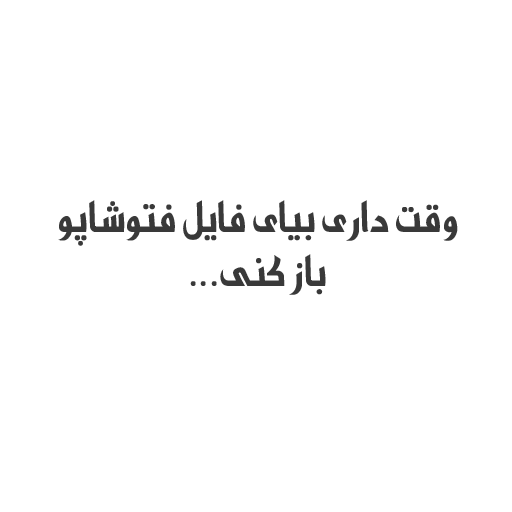
<style>
.page{position:relative;width:512px;height:512px;background:#ffffff}
.page>*{position:absolute;margin:0}
.t1{font:45px "Mj_HeritageTwo-Bold";color:#393939}
</style>
<div class="page">
<p class="t1" style="left:58px;top:200px;width:400px;height:95px;text-align:center">وقت داری بیای فایل فتوشاپو باز کنی...</p>
</div>
